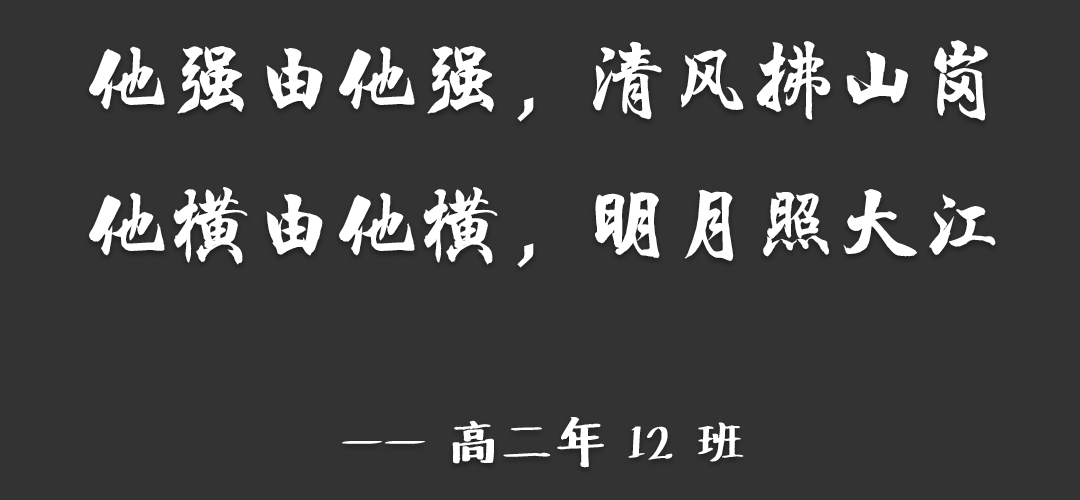
<style>
.page{position:relative;width:1080px;height:500px;background:#333333}
.page>*{position:absolute;margin:0}
.t1{font:83.3px "HYChengXingJ";color:#ffffff}
.t2{font:50px "Undefined";color:#ffffff}
</style>
<div class="page">
<p class="t1" style="left:89px;top:40px;width:907px;height:428px;text-align:center">他强由他强，清风拂山岗<br>他横由他横，明月照大江<br><span class="t2"><br>—— 高二年 12 班</span></p>
</div>
